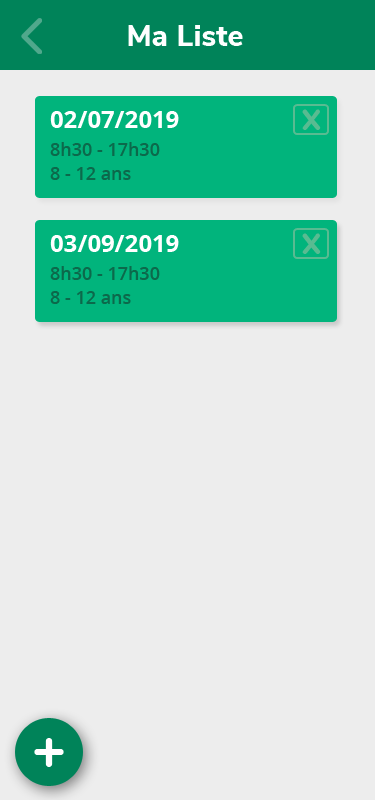
<style>
.page{position:relative;width:375px;height:800px;background:#ededed}
.page>*{position:absolute;margin:0}
.t1{font:30px "NunitoSans-ExtraBold";color:#ffffff}
.t2{font:24px "OpenSans-Bold";color:#ffffff}
.t3{font:37.6px "Quicksand-Bold";color:#59bb91}
.t4{font:18px "OpenSans-SemiBold";color:#0c694b}
.t5{font:60px "Nunito-ExtraBold";color:#ffffff}
</style>
<div class="page">
<p class="t1" style="left:128px;top:25px;width:115px;height:21px">Ma Liste</p>
<p class="t2" style="left:50px;top:111px;width:129px;height:17px">02/07/2019</p>
<p class="t3" style="left:302px;top:109px;width:19px;height:21px">x</p>
<p class="t4" style="left:50px;top:142px;width:110px;height:14px">8h30 - 17h30</p>
<p class="t4" style="left:50px;top:167px;width:81px;height:13px">8 - 12 ans</p>
<p class="t3" style="left:302px;top:233px;width:19px;height:21px">x</p>
<p class="t2" style="left:50px;top:235px;width:129px;height:17px">03/09/2019</p>
<p class="t4" style="left:50px;top:266px;width:110px;height:14px">8h30 - 17h30</p>
<p class="t4" style="left:50px;top:291px;width:81px;height:13px">8 - 12 ans</p>
<p class="t5" style="left:34px;top:738px;width:30px;height:29px">+</p>
</div>
